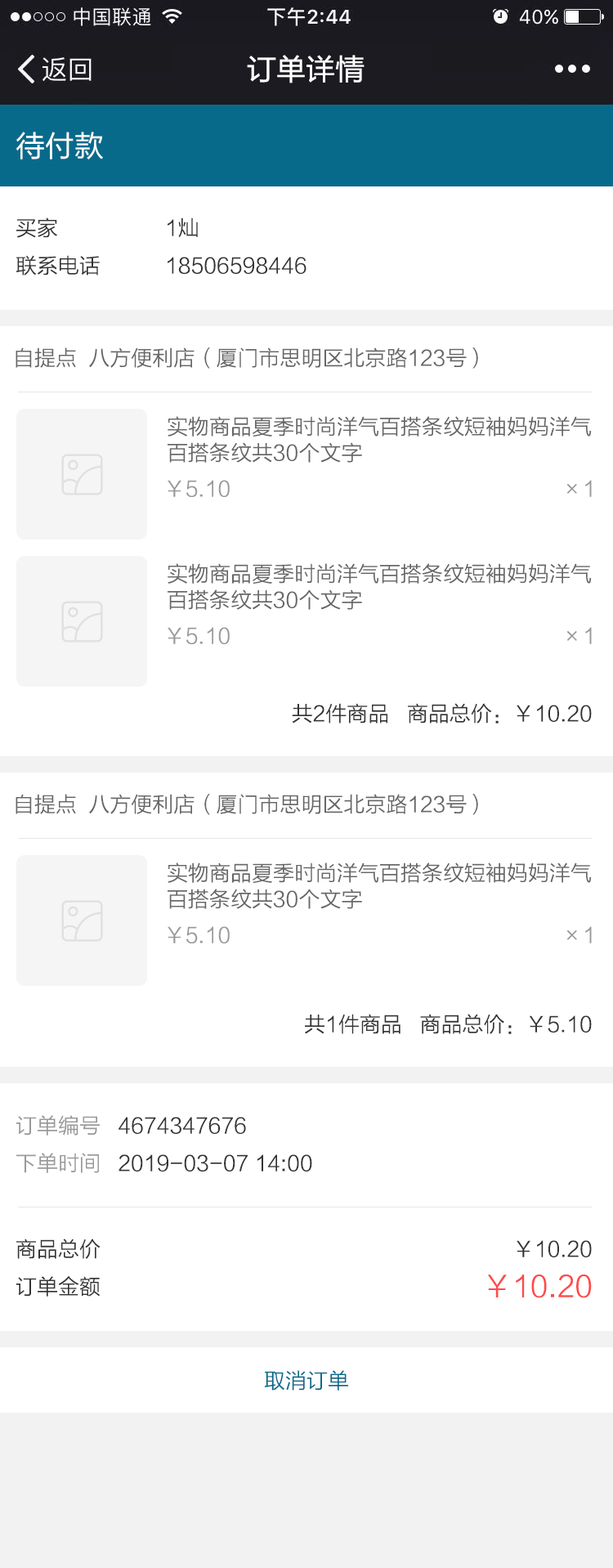
<style>
.page{position:relative;width:613px;height:1568px;background:#ffffff}
.page>*{position:absolute;margin:0}
.t1{font:29.4px "FZLTHK--GBK1-0";color:#ffffff}
.t2{font:21.3px/37.6px "FZLTXHK";color:#333333}
.t3{font:21.3px "FZLTXHK";color:#666666}
.t4{font:21.3px/26.2px "FZLTXHK";color:#666666}
.t5{font:21.3px "FZLTXHK";color:#999999}
.t6{font:21.3px "FZLTXHK";color:#333333}
.t7{font:21.3px/37.6px "FZLTXHK";color:#999999}
.t8{font:29.4px "FZLTXHK";color:#ff4a4a}
.t9{font:21.3px "FZLTXHK";color:#086a8b}
</style>
<div class="page">
<p class="t1" style="left:247px;top:55px;width:118px;height:28px">订单详情</p>
<p class="t1" style="left:16px;top:132px;width:87px;height:27px">待付款</p>
<p class="t2" style="left:16px;top:217px;width:84px;height:59px">买家<br>联系电话</p>
<p class="t2" style="left:168px;top:217px;width:139px;height:57px">1灿<br>18506598446</p>
<p class="t3" style="left:16px;top:347px;width:462px;height:22px">自提点  八方便利店（厦门市思明区北京路123号）</p>
<p class="t4" style="left:168px;top:416px;width:424px;height:47px">实物商品夏季时尚洋气百搭条纹短袖妈妈洋气<br>百搭条纹共30个文字</p>
<p class="t5" style="left:168px;top:480px;width:62px;height:17px">￥5.10</p>
<p class="t5" style="left:567px;top:480px;width:25px;height:17px">×1</p>
<p class="t4" style="left:168px;top:563px;width:424px;height:47px">实物商品夏季时尚洋气百搭条纹短袖妈妈洋气<br>百搭条纹共30个文字</p>
<p class="t5" style="left:168px;top:627px;width:62px;height:17px">￥5.10</p>
<p class="t5" style="left:567px;top:627px;width:25px;height:17px">×1</p>
<p class="t6" style="left:292px;top:703px;width:300px;height:21px">共2件商品   商品总价：￥10.20</p>
<p class="t3" style="left:16px;top:794px;width:462px;height:21px">自提点  八方便利店（厦门市思明区北京路123号）</p>
<p class="t4" style="left:168px;top:862px;width:424px;height:47px">实物商品夏季时尚洋气百搭条纹短袖妈妈洋气<br>百搭条纹共30个文字</p>
<p class="t5" style="left:168px;top:926px;width:62px;height:17px">￥5.10</p>
<p class="t5" style="left:567px;top:926px;width:25px;height:17px">×1</p>
<p class="t6" style="left:305px;top:1014px;width:287px;height:20px">共1件商品   商品总价：￥5.10</p>
<p class="t2" style="left:16px;top:1115px;width:296px;height:58px"><span class="t7">订单编号   </span>4674347676<br><span class="t7">下单时间   </span>2019-03-07 14:00</p>
<p class="t2" style="left:16px;top:1239px;width:85px;height:58px">商品总价<br>订单金额</p>
<p class="t6" style="left:517px;top:1240px;width:75px;height:17px">￥10.20</p>
<p class="t8" style="left:488px;top:1274px;width:104px;height:24px">￥10.20</p>
<p class="t9" style="left:264px;top:1370px;width:84px;height:21px">取消订单</p>
</div>
